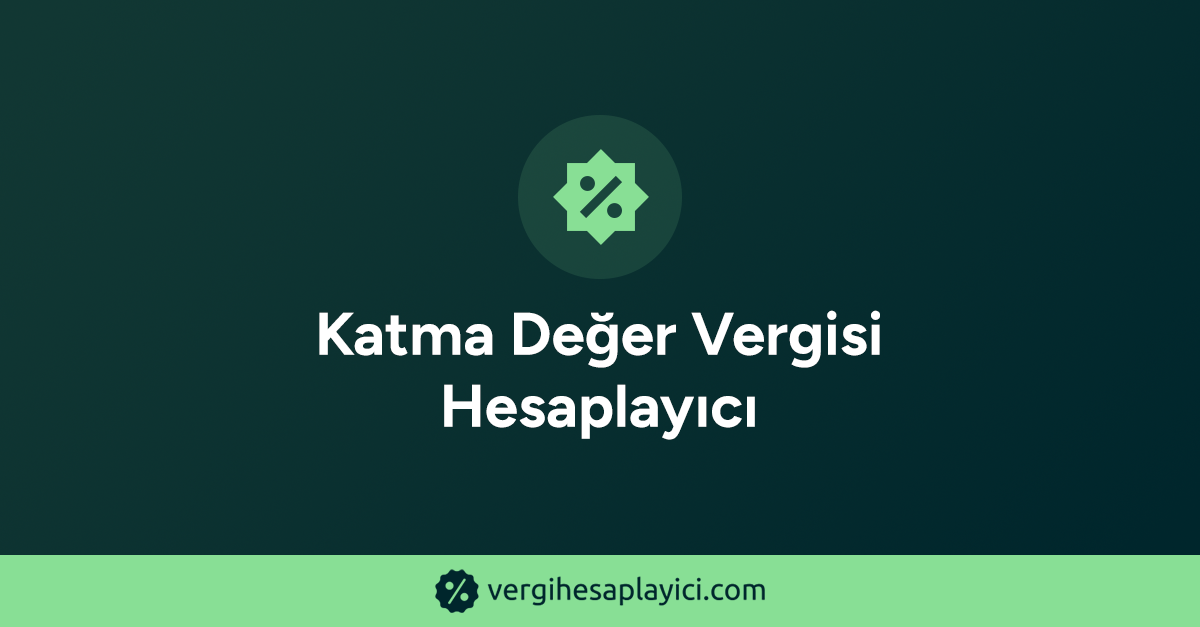
<style>
.page{position:relative;width:1200px;height:627px}
.page>*{position:absolute;margin:0}
.t1{font:60px "Figtree-Bold";color:#ffffff;font-weight:bold}
</style>
<div class="page">
<p class="t1" style="left:319px;top:310px;width:561px;height:130px;text-align:center">Katma Değer Vergisi<br>Hesaplayıcı</p>
</div>
